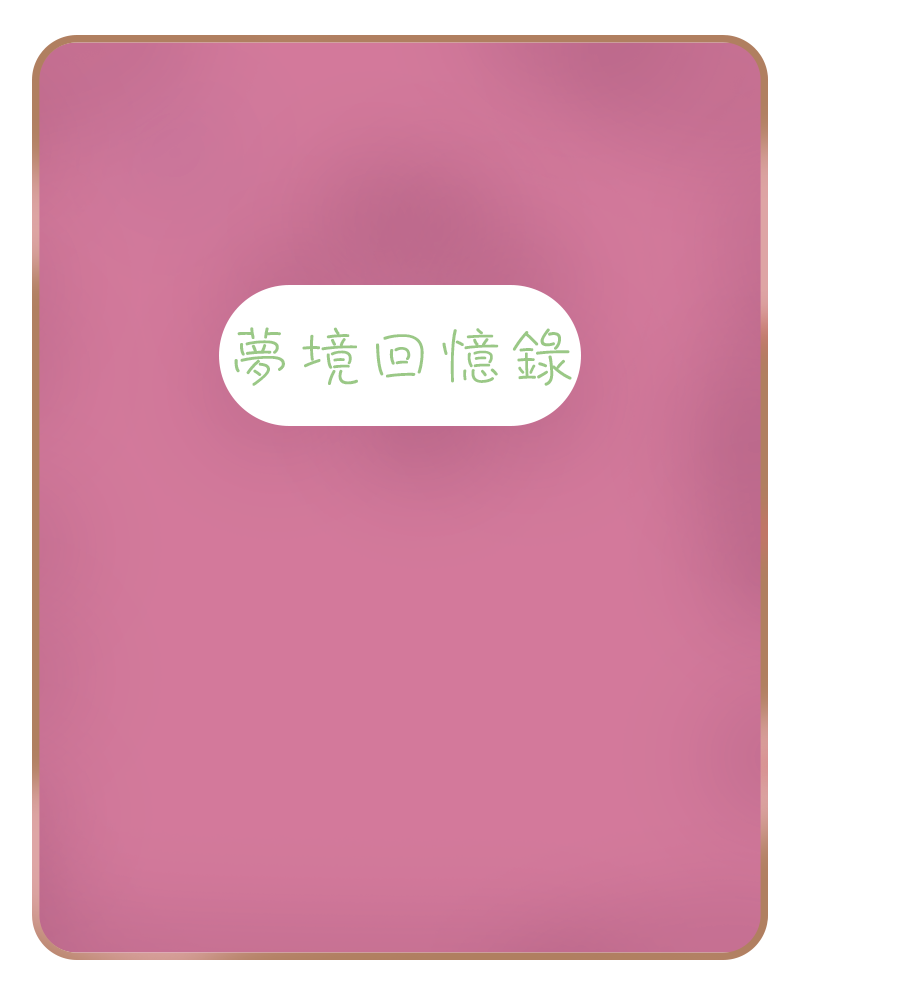
<style>
.page{position:relative;width:900px;height:985px;background:#ffffff}
.page>*{position:absolute;margin:0}
.t1{font:70.8px "DFTsai-W3-WIN-BF";color:#9ac886}
</style>
<div class="page">
<p class="t1" style="left:234px;top:327px;width:338px;height:59px">夢境回憶錄</p>
</div>
